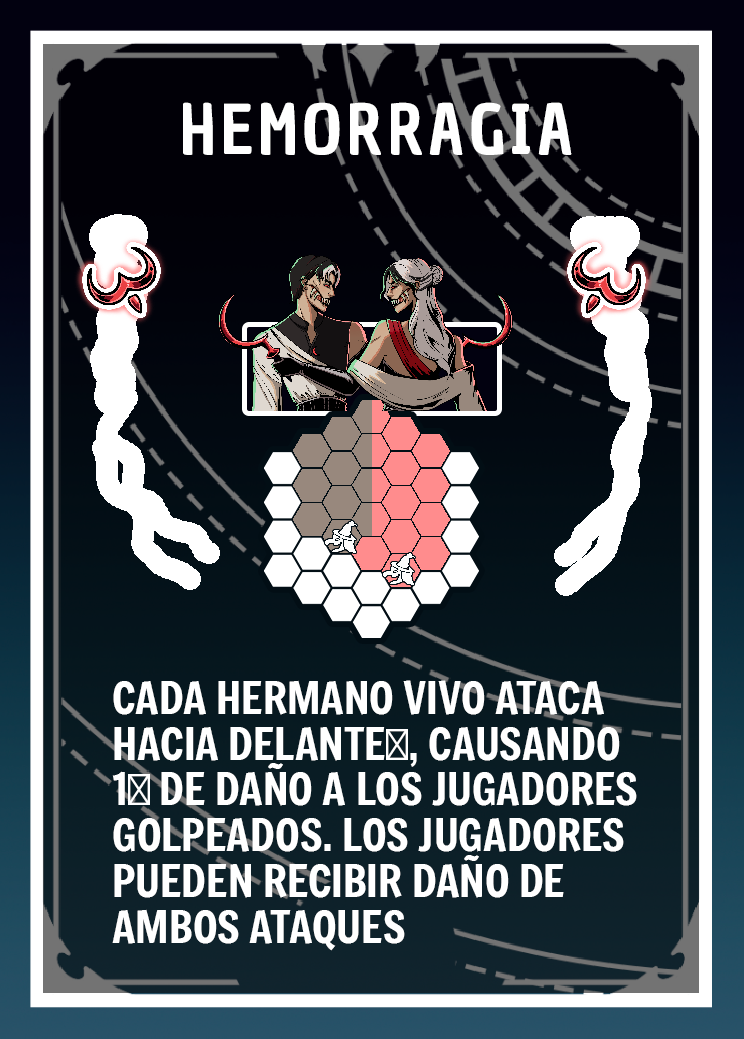
<style>
.page{position:relative;width:744px;height:1039px}
.page>*{position:absolute;margin:0}
.t1{font:66.7px "ChauPhilomeneOne-Regular";letter-spacing:0.075em;color:#ffffff}
.t2{font:43.7px/45.8px "Freeman-Regular";color:#ffffff}
.t3{font:43.7px/45.8px "MyriadPro-Regular";color:#ffffff}
</style>
<div class="page">
<p class="t1" style="left:183px;top:102px;width:389px;height:53px">HEMORRAGIA</p>
<p class="t2" style="left:112px;top:680px;width:525px;height:271px">CADA HERMANO VIVO ATACA HACIA DELANTE<span class="t3">⬆️</span>, CAUSANDO 1<span class="t3">❤️</span> DE DAÑO A LOS JUGADORES GOLPEADOS. LOS JUGADORES PUEDEN RECIBIR DAÑO DE AMBOS ATAQUES</p>
</div>
